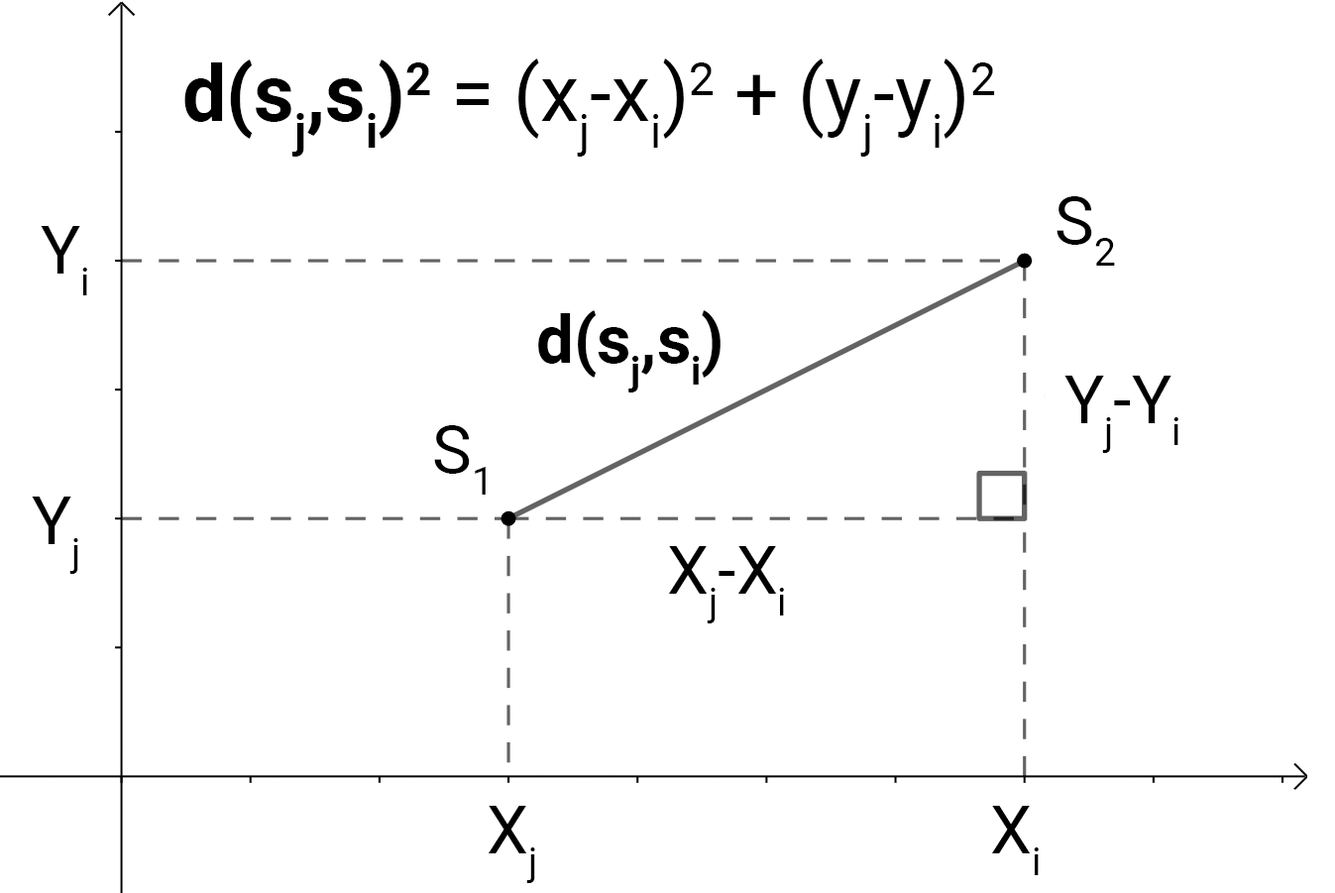
<style>
.page{position:relative;width:1335px;height:893px;background:#ffffff}
.page>*{position:absolute;margin:0}
.t1{font:78.5px "Roboto-Regular";color:#000000}
.t2{font:78.5px "Roboto-Bold";color:#000000}
.t3{font:66.1px "Roboto-Regular";color:#000000}
.t4{font:66.1px "Roboto-Bold";color:#000000}
</style>
<div class="page">
<p class="t1" style="left:184px;top:58px;width:811px;height:99px"><span class="t2">d(sj,si)2</span> = (xj-xi)2 + (yj-yi)2</p>
<p class="t3" style="left:1057px;top:196px;width:58px;height:70px">S2</p>
<p class="t3" style="left:41px;top:226px;width:46px;height:69px">Yi</p>
<p class="t4" style="left:538px;top:310px;width:183px;height:83px">d(sj,si)</p>
<p class="t3" style="left:1065px;top:376px;width:114px;height:77px">Yj-Yi</p>
<p class="t3" style="left:434px;top:425px;width:52px;height:70px">S1</p>
<p class="t3" style="left:32px;top:497px;width:46px;height:77px">Yj</p>
<p class="t3" style="left:668px;top:546px;width:116px;height:77px">Xj-Xi</p>
<p class="t3" style="left:488px;top:806px;width:47px;height:77px">Xj</p>
<p class="t3" style="left:991px;top:806px;width:48px;height:69px">Xi</p>
</div>
